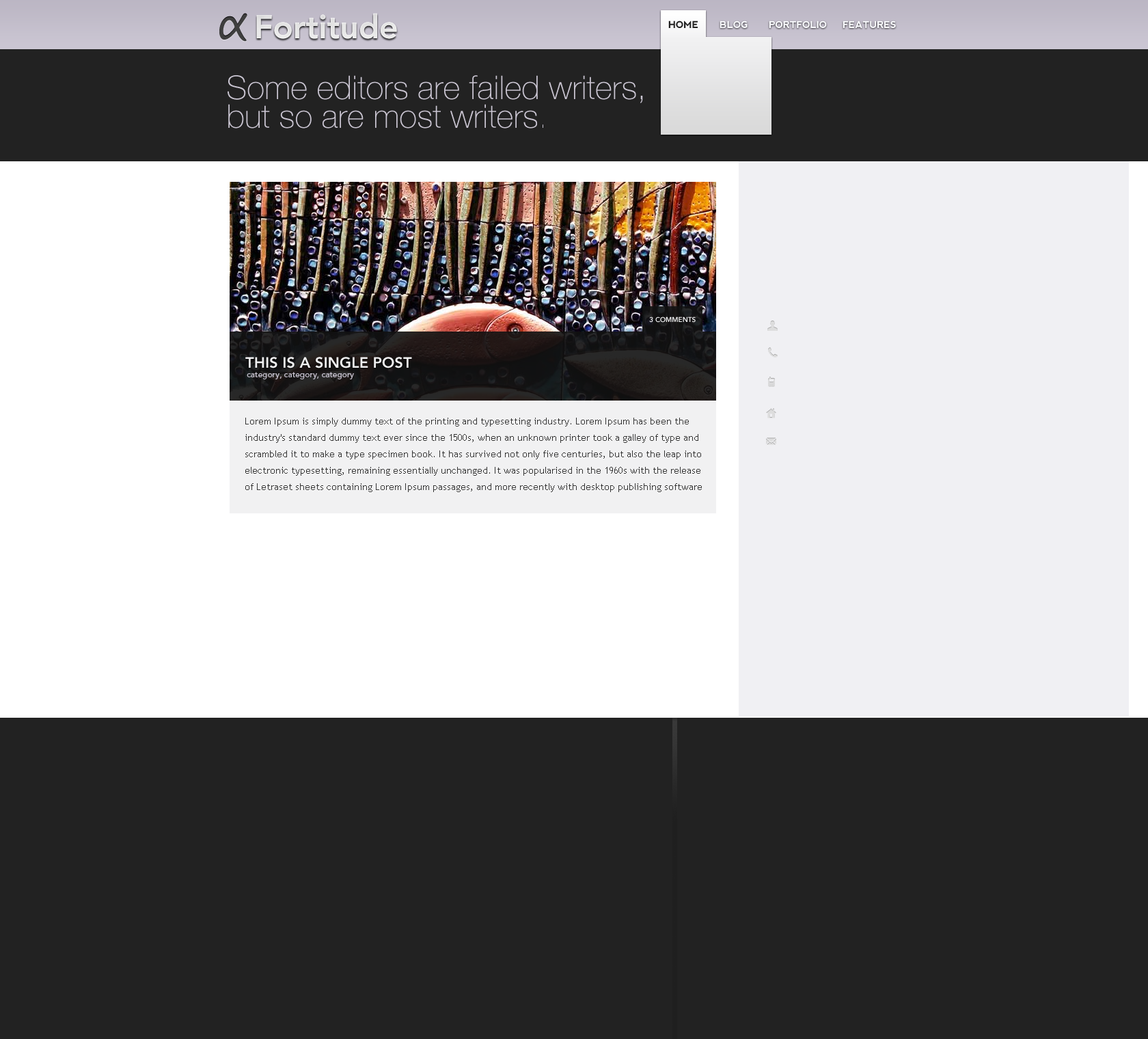
<style>
.page{position:relative;width:1148px;height:1039px;background:#222222}
.page>*{position:absolute;margin:0}
.t1{font:49.2px "SegoeScript";color:#3f3f3f}
.t2{font:32.8px "Avenir-Heavy";color:#e8e8e8}
.t3{font:9.6px "nevis-Bold";color:#222222}
.t4{font:9.6px "nevis-Bold";color:#f9fafd}
.t5{font:32.8px/28.7px "HelveticaNeueLT-Thin";color:#cbc6d3}
.t6{font:32.8px/28.7px "HelveticaNeueLT-UltraLight";color:#cbc6d3}
.t7{font:6.8px "Avenir-Heavy";color:#f1f1f2}
.t8{font:15px "Avenir-Heavy";color:#f1f1f2}
.t9{font:8.2px "Avenir-Medium";color:#c7c2cf}
.t10{font:9.6px/16.4px "TrebuchetMS";color:#333333}
</style>
<div class="page">
<p class="t1" style="left:219px;top:13px;width:28px;height:29px">α</p>
<p class="t2" style="left:256px;top:13px;width:141px;height:26px">Fortitude</p>
<p class="t2" style="left:256px;top:13px;width:141px;height:26px">Fortitude</p>
<p class="t3" style="left:668px;top:21px;width:30px;height:7px">HOME</p>
<p class="t4" style="left:720px;top:21px;width:176px;height:7px">BLOG PORTFOLIO FEATURES</p>
<p class="t5" style="left:228px;top:75px;width:415px;height:53px">Some editors are failed writers, <br>but so are most writers<span class="t6">.</span></p>
<p class="t7" style="left:649px;top:316px;width:47px;height:7px">3 COMMENTS</p>
<p class="t8" style="left:245px;top:357px;width:167px;height:11px">THIS IS A SINGLE POST</p>
<p class="t9" style="left:247px;top:372px;width:107px;height:7px">category, category, category</p>
<p class="t10" style="left:245px;top:418px;width:457px;height:74px">Lorem Ipsum is simply dummy text of the printing and typesetting industry. Lorem Ipsum has been the <br>industry's standard dummy text ever since the 1500s, when an unknown printer took a galley of type and <br>scrambled it to make a type specimen book. It has survived not only five centuries, but also the leap into <br>electronic typesetting, remaining essentially unchanged. It was popularised in the 1960s with the release <br>of Letraset sheets containing Lorem Ipsum passages, and more recently with desktop publishing software</p>
</div>
